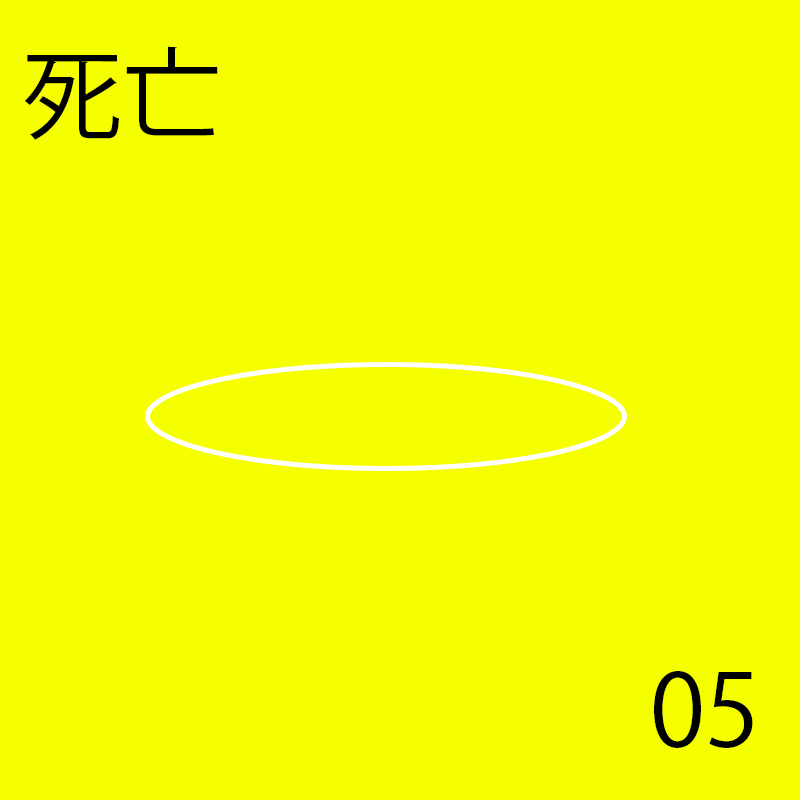
<style>
.page{position:relative;width:800px;height:800px;background:#f6ff00}
.page>*{position:absolute;margin:0}
.t1{font:100px "KozGoPr6N-Regular";color:#000000}
</style>
<div class="page">
<p class="t1" style="left:24px;top:46px;width:194px;height:94px">死亡</p>
<p class="t1" style="left:24px;top:46px;width:194px;height:94px">死亡</p>
<p class="t1" style="left:24px;top:46px;width:194px;height:94px">死亡</p>
<p class="t1" style="left:24px;top:46px;width:194px;height:94px">死亡</p>
<p class="t1" style="left:24px;top:46px;width:194px;height:94px">死亡</p>
<p class="t1" style="left:24px;top:46px;width:194px;height:94px">死亡</p>
<p class="t1" style="left:654px;top:671px;width:102px;height:77px">00</p>
<p class="t1" style="left:654px;top:671px;width:85px;height:77px">01</p>
<p class="t1" style="left:654px;top:671px;width:101px;height:77px">02</p>
<p class="t1" style="left:654px;top:671px;width:99px;height:77px">03</p>
<p class="t1" style="left:654px;top:671px;width:105px;height:77px">04</p>
<p class="t1" style="left:654px;top:671px;width:99px;height:77px">05</p>
</div>
